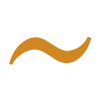
<style>
.page{position:relative;width:100px;height:100px;background:#ffffff}
.page>*{position:absolute;margin:0}
.t1{font:210px "LibertinusSans-Regular";color:#d1861f}
</style>
<div class="page">
<p class="t1" style="left:9px;top:36px;width:83px;height:29px">~</p>
</div>
